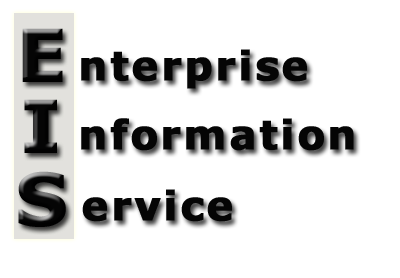
<style>
.page{position:relative;width:400px;height:278px;background:#ffffff}
.page>*{position:absolute;margin:0}
.t1{font:72px "Verdana-Bold";letter-spacing:0.05em;color:#050505;font-weight:bold}
.t2{font:40px "Verdana-Bold";letter-spacing:0.05em;color:#050505;font-weight:bold}
.t3{font:48px "Verdana-Bold";letter-spacing:0.05em;color:#050505;font-weight:bold}
</style>
<div class="page">
<p class="t1" style="left:22px;top:28px;width:41px;height:54px">E</p>
<p class="t2" style="left:81px;top:49px;width:226px;height:40px"><span class="t3">   </span>nterprise</p>
<p class="t1" style="left:24px;top:99px;width:33px;height:54px">I</p>
<p class="t2" style="left:81px;top:118px;width:273px;height:33px"><span class="t3">   </span>nformation</p>
<p class="t1" style="left:18px;top:171px;width:48px;height:56px">S</p>
<p class="t2" style="left:82px;top:189px;width:150px;height:33px"><span class="t3">   </span>ervice</p>
</div>
